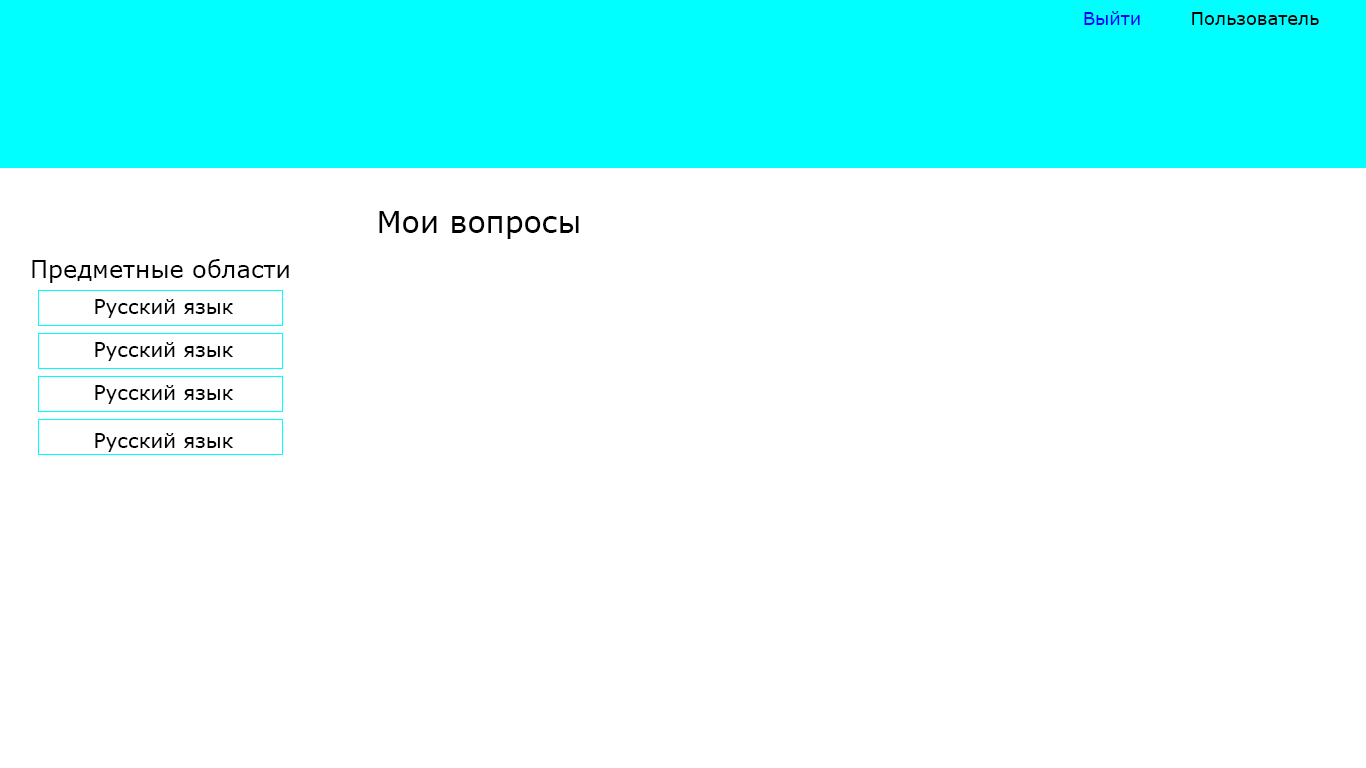
<style>
.page{position:relative;width:1366px;height:768px;background:#ffffff}
.page>*{position:absolute;margin:0}
.t1{font:18px "Verdana";color:#0000ff}
.t2{font:18px "Verdana";color:#000000}
.t3{font:30px "Verdana";color:#000000}
.t4{font:24px "Verdana";color:#000000}
.t5{font:20px "Verdana";color:#000000}
</style>
<div class="page">
<p class="t1" style="left:1084px;top:11px;width:56px;height:14px">Выйти</p>
<p class="t2" style="left:1192px;top:12px;width:127px;height:13px">Пользователь</p>
<p class="t3" style="left:379px;top:211px;width:200px;height:28px">Мои вопросы</p>
<p class="t4" style="left:32px;top:259px;width:257px;height:24px">Предметные области</p>
<p class="t5" style="left:95px;top:299px;width:138px;height:19px">Русский язык</p>
<p class="t5" style="left:95px;top:342px;width:138px;height:19px">Русский язык</p>
<p class="t5" style="left:95px;top:385px;width:138px;height:19px">Русский язык</p>
<p class="t5" style="left:95px;top:433px;width:138px;height:19px">Русский язык</p>
</div>
